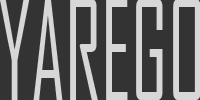
<style>
.page{position:relative;width:200px;height:100px;background:#333333}
.page>*{position:absolute;margin:0}
.t1{font:132px "AgencyFB-Reg";color:#d7d7d7;scale:0.64 1}
</style>
<div class="page">
<p class="t1" style="left:0px;top:0px;width:201px;height:100px">YAREGO</p>
</div>
